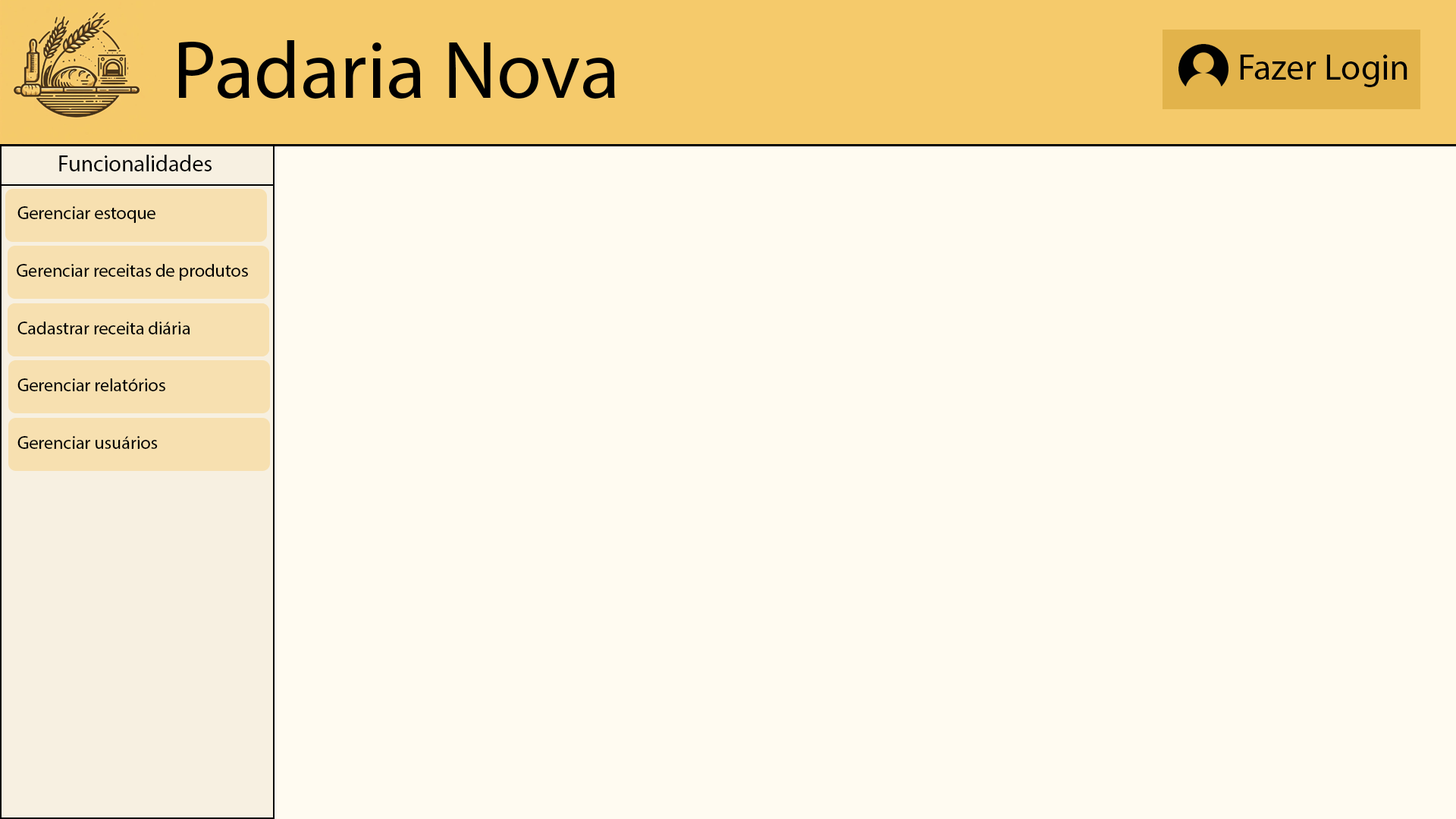
<style>
.page{position:relative;width:1456px;height:819px;background:#fffbf1}
.page>*{position:absolute;margin:0}
.t1{font:81.6px "MyriadPro-Regular";color:#000000}
.t2{font:36.4px "MyriadPro-Regular";color:#000000}
.t3{font:22.7px "MyriadPro-Regular";color:#000000}
.t4{font:18.2px "MyriadPro-Regular";color:#000000}
</style>
<div class="page">
<p class="t1" style="left:179px;top:40px;width:436px;height:59px">Padaria Nova</p>
<p class="t2" style="left:1240px;top:55px;width:167px;height:32px">Fazer Login</p>
<p class="t3" style="left:59px;top:155px;width:153px;height:16px">Funcionalidades</p>
<p class="t4" style="left:17px;top:206px;width:138px;height:17px">Gerenciar estoque</p>
<p class="t4" style="left:17px;top:264px;width:231px;height:17px">Gerenciar receitas de produtos</p>
<p class="t4" style="left:17px;top:322px;width:173px;height:12px">Cadastrar receita diária</p>
<p class="t4" style="left:17px;top:322px;width:173px;height:12px">Cadastrar receita diária</p>
<p class="t4" style="left:17px;top:378px;width:148px;height:13px">Gerenciar relatórios</p>
<p class="t4" style="left:17px;top:436px;width:141px;height:13px">Gerenciar usuários</p>
</div>
